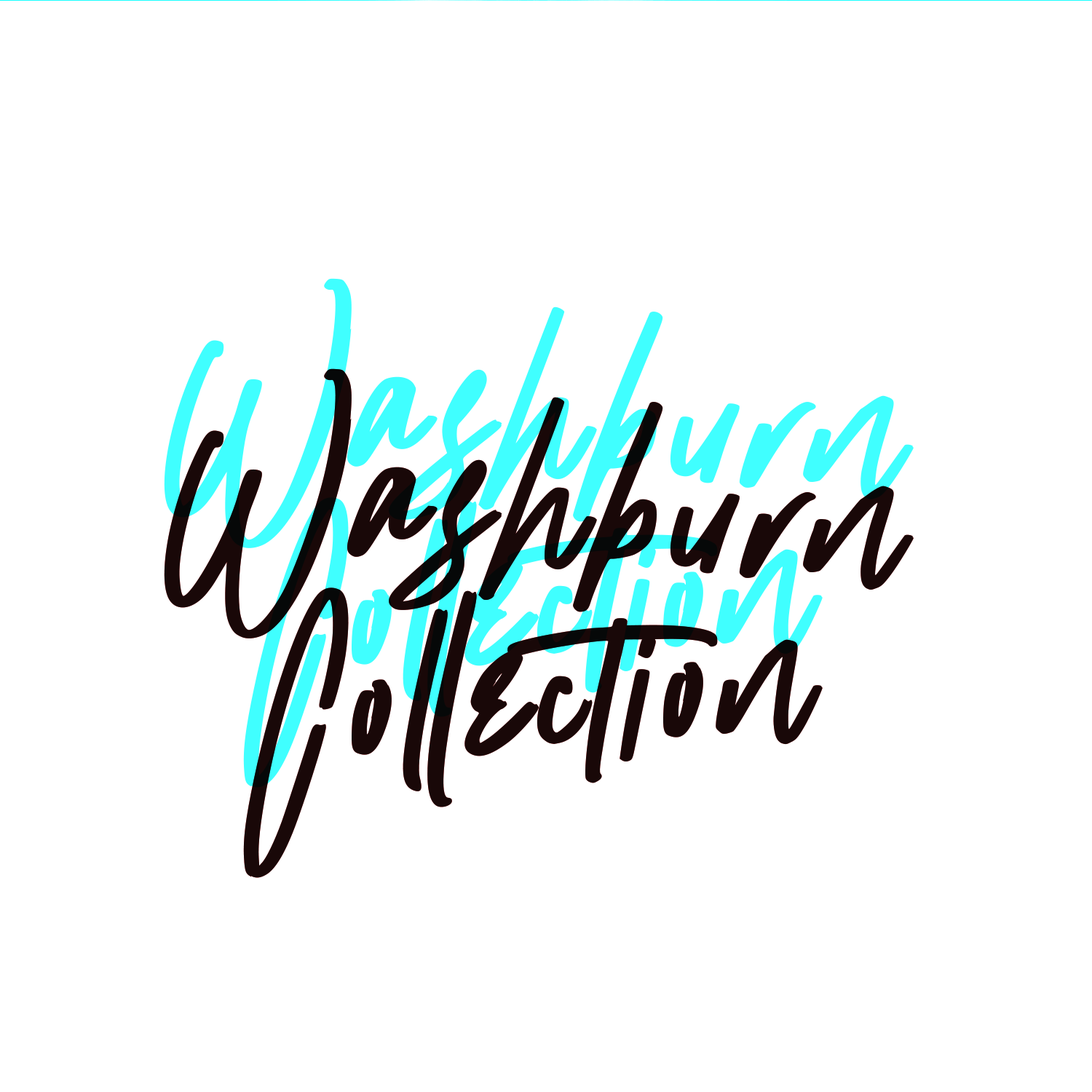
<style>
.page{position:relative;width:1092px;height:1092px;background:#ffffff}
.page>*{position:absolute;margin:0}
.t1{font:398.9px "Wattermellon";letter-spacing:0.04em;color:#40ffff}
.t2{font:398.9px "Wattermellon";letter-spacing:0.03em;color:#40ffff}
</style>
<div class="page">
<p class="t1" style="left:164px;top:277px;width:750px;height:270px;rotate:3deg">Washburn</p>
<p class="t2" style="left:243px;top:496px;width:580px;height:291px;rotate:-3deg">Collection</p>
</div>
